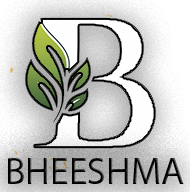
<style>
.page{position:relative;width:190px;height:192px}
.page>*{position:absolute;margin:0}
.t1{font:38px "MyriadPro-Regular";color:#000000}
</style>
<div class="page">
<p class="t1" style="left:8px;top:158px;width:176px;height:26px">BHEESHMA</p>
</div>
